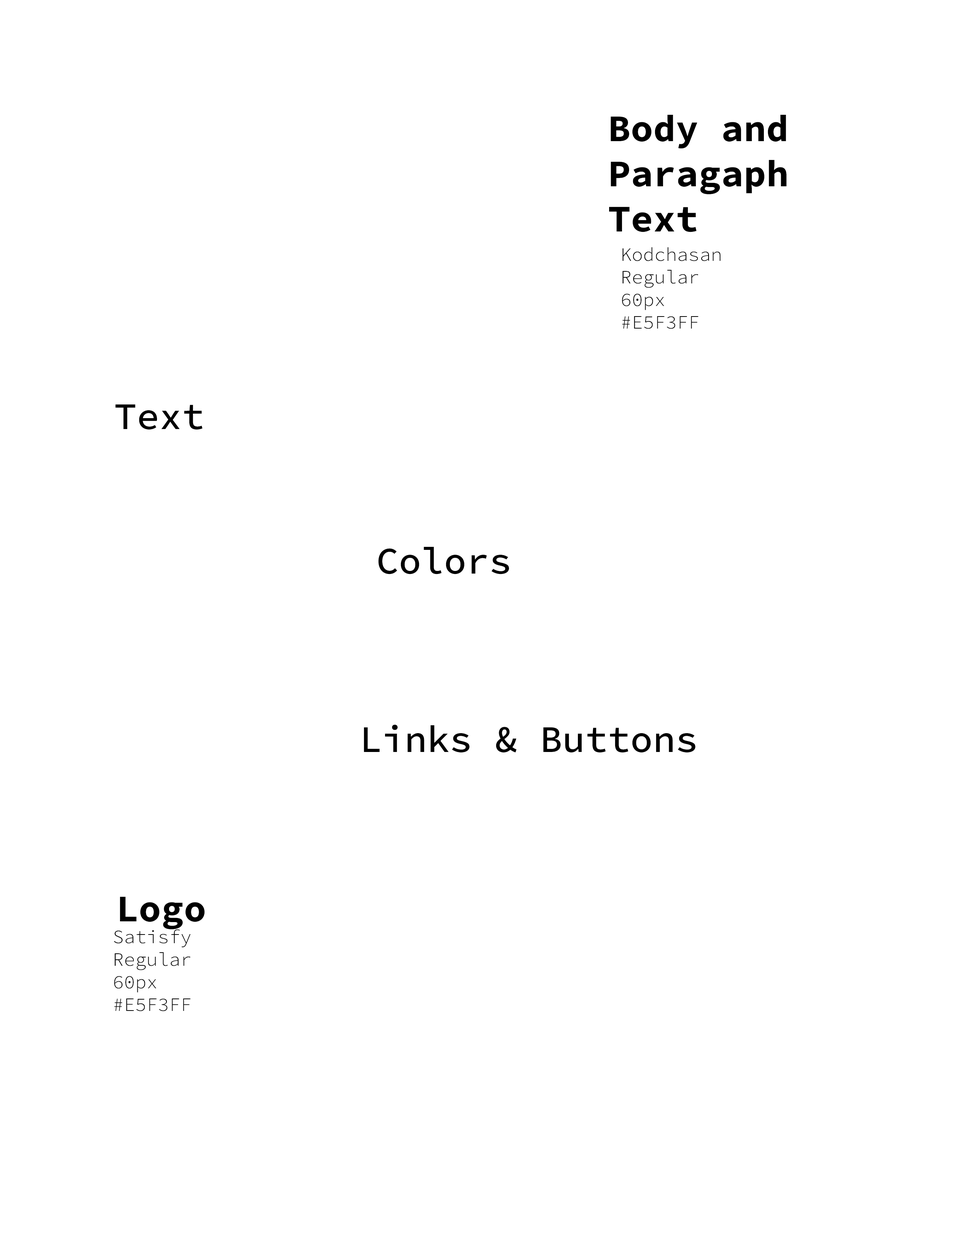
<style>
.page{position:relative;width:960px;height:1242px;background:#ffffff}
.page>*{position:absolute;margin:0}
.t1{font:37.6px "SourceCodeRoman-Bold";color:#000000}
.t2{font:18.8px "SourceCodeRoman-Light";color:#000000}
.t3{font:37.6px "SourceCodeRoman-Medium";color:#000000}
</style>
<div class="page">
<p class="t1" style="left:609px;top:115px;width:177px;height:117px">Body and <br>Paragaph <br>Text</p>
<p class="t2" style="left:622px;top:247px;width:98px;height:82px">Kodchasan<br>Regular<br>60px<br>#E5F3FF</p>
<p class="t3" style="left:115px;top:404px;width:88px;height:26px">Text</p>
<p class="t3" style="left:378px;top:547px;width:131px;height:27px">Colors</p>
<p class="t3" style="left:364px;top:725px;width:331px;height:28px">Links &amp; Buttons</p>
<p class="t1" style="left:120px;top:897px;width:85px;height:32px">Logo</p>
<p class="t2" style="left:114px;top:929px;width:76px;height:82px">Satisfy<br>Regular<br>60px<br>#E5F3FF</p>
</div>
